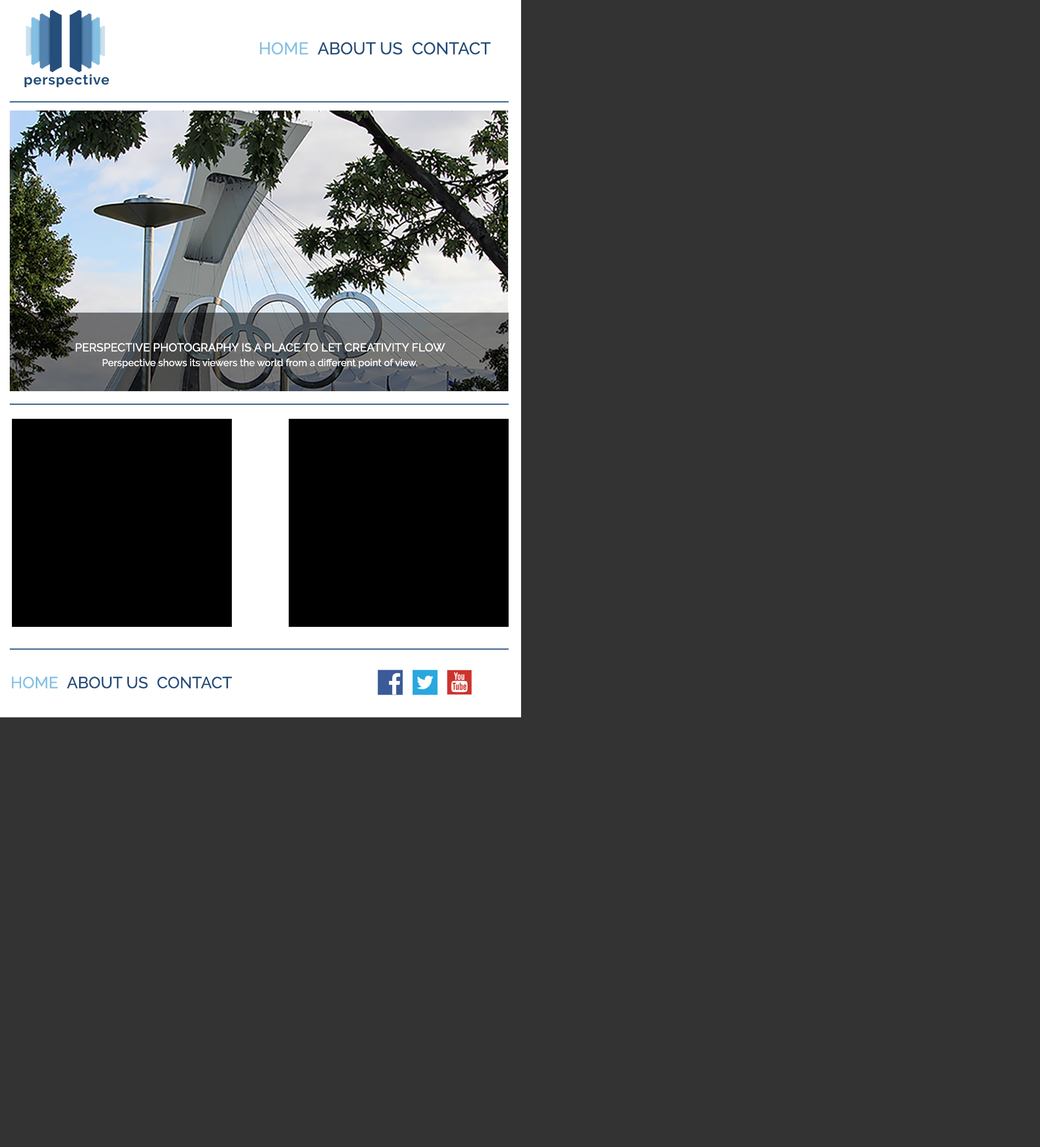
<style>
.page{position:relative;width:1040px;height:1147px;background:#333333}
.page>*{position:absolute;margin:0}
.t1{font:16.9px "Raleway-Medium";color:#85c1e5}
.t2{font:16.9px "Raleway-Medium";color:#254e7b}
.t3{font:11.5px "Raleway-Medium";color:#ffffff}
.t4{font:9.7px "Raleway-Medium";color:#ffffff}
.t5{font:16.1px "Raleway-Medium";color:#85c1e5}
.t6{font:16.1px "Raleway-Medium";color:#254e7b}
</style>
<div class="page">
<p class="t1" style="left:260px;top:42px;width:48px;height:13px">HOME</p>
<p class="t2" style="left:317px;top:42px;width:85px;height:13px">ABOUT US</p>
<p class="t2" style="left:412px;top:42px;width:79px;height:13px">CONTACT</p>
<p class="t3" style="left:76px;top:343px;width:369px;height:9px">PERSPECTIVE PHOTOGRAPHY IS A PLACE TO LET CREATIVITY FLOW</p>
<p class="t4" style="left:102px;top:359px;width:316px;height:9px">Perspective shows its viewers the world from a different point of view.</p>
<p class="t5" style="left:12px;top:677px;width:46px;height:11px">HOME</p>
<p class="t6" style="left:67px;top:677px;width:81px;height:11px">ABOUT US</p>
<p class="t6" style="left:157px;top:677px;width:75px;height:11px">CONTACT</p>
</div>
